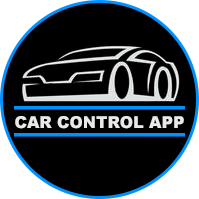
<style>
.page{position:relative;width:199px;height:199px;background:#000000}
.page>*{position:absolute;margin:0}
.t1{font:16.2px "Arial-Black";color:#e9e9e9}
</style>
<div class="page">
<p class="t1" style="left:15px;top:116px;width:169px;height:13px">CAR CONTROL APP</p>
</div>
